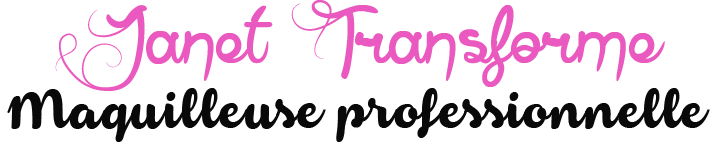
<style>
.page{position:relative;width:721px;height:145px;background:#ffffff}
.page>*{position:absolute;margin:0}
.t1{font:103px "AnneExilum";color:#ea59bf}
.t2{font:48px "Armonioso";color:#090909}
</style>
<div class="page">
<p class="t1" style="left:55px;top:0px;width:610px;height:91px">Janet Transforme</p>
<p class="t2" style="left:7px;top:88px;width:703px;height:54px">Maquilleuse professionnelle</p>
</div>
